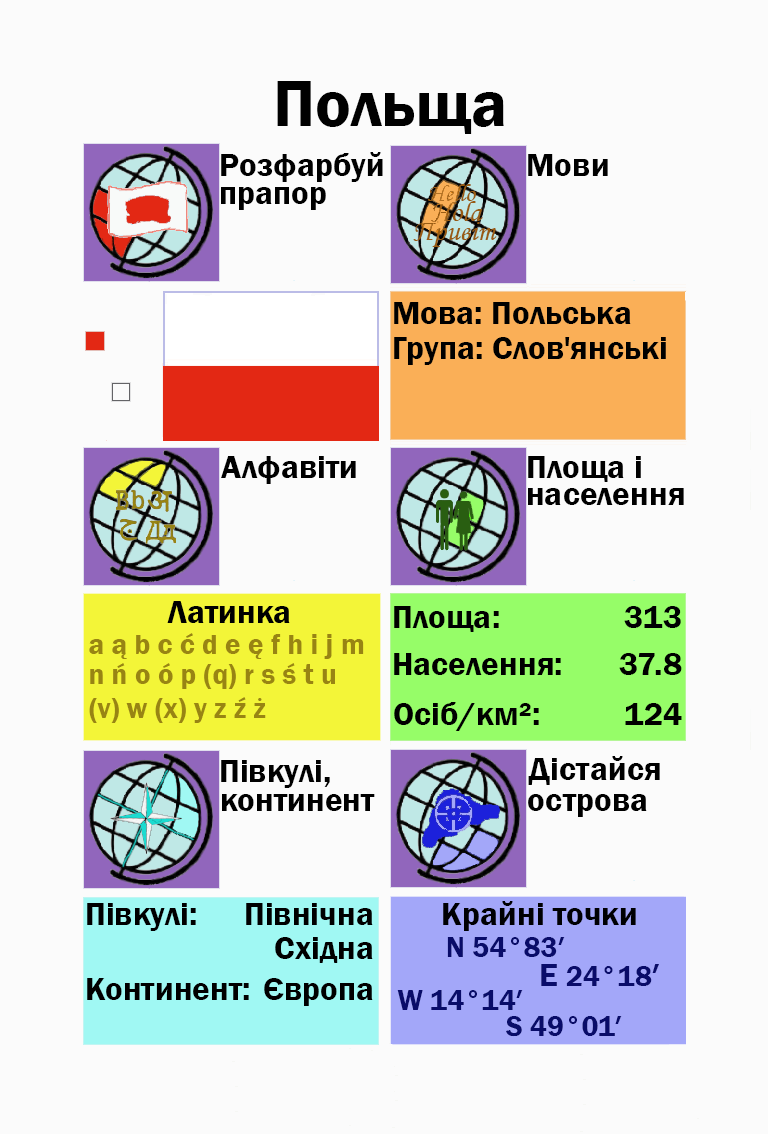
<style>
.page{position:relative;width:768px;height:1134px;background:#fbfbfb}
.page>*{position:absolute;margin:0}
.t1{font:66.7px "FranklinGothic-Demi";color:#000000}
.t2{font:33.3px "FranklinGothic-Demi";color:#000000}
.t3{font:33.3px "FranklinGothic-Demi";color:#000003}
.t4{font:29.2px "FranklinGothic-Demi";color:#988413}
.t5{font:29.2px "FranklinGothic-Demi";color:#090c69}
.t6{font:33.3px "FranklinGothic-Demi";color:#090c69}
</style>
<div class="page">
<p class="t1" style="left:277px;top:81px;width:227px;height:53px">Польща</p>
<p class="t2" style="left:221px;top:152px;width:162px;height:30px">Розфарбуй</p>
<p class="t2" style="left:528px;top:154px;width:80px;height:22px">Мови</p>
<p class="t2" style="left:221px;top:187px;width:105px;height:23px">прапор</p>
<p class="t2" style="left:394px;top:302px;width:237px;height:22px">Мова: Польська</p>
<p class="t2" style="left:394px;top:337px;width:272px;height:28px">Група: Слов'янські</p>
<p class="t2" style="left:221px;top:456px;width:135px;height:28px">Алфавіти</p>
<p class="t2" style="left:528px;top:456px;width:113px;height:26px">Площа і</p>
<p class="t2" style="left:528px;top:488px;width:156px;height:17px">населення</p>
<p class="t2" style="left:167px;top:601px;width:123px;height:22px">Латинка</p>
<p class="t2" style="left:394px;top:606px;width:105px;height:26px">Площа:</p>
<p class="t3" style="left:624px;top:606px;width:57px;height:22px">313</p>
<p class="t4" style="left:89px;top:633px;width:275px;height:26px">a ą b c ć d e ę f h i j m</p>
<p class="t2" style="left:394px;top:653px;width:167px;height:22px">Населення:</p>
<p class="t2" style="left:619px;top:653px;width:63px;height:22px">37.8</p>
<p class="t4" style="left:90px;top:663px;width:245px;height:26px">n ń o ó p (q) r s ś t u</p>
<p class="t4" style="left:89px;top:697px;width:177px;height:26px">(v) w (x) y z ź ż</p>
<p class="t2" style="left:394px;top:702px;width:145px;height:29px">Осіб/км²:</p>
<p class="t2" style="left:625px;top:703px;width:57px;height:22px">124</p>
<p class="t2" style="left:221px;top:760px;width:109px;height:28px">Півкулі,</p>
<p class="t2" style="left:528px;top:756px;width:132px;height:29px">Дістайся</p>
<p class="t2" style="left:222px;top:794px;width:153px;height:17px">континент</p>
<p class="t2" style="left:528px;top:794px;width:119px;height:23px">острова</p>
<p class="t2" style="left:87px;top:903px;width:109px;height:28px">Півкулі:</p>
<p class="t2" style="left:246px;top:903px;width:127px;height:22px">Північна</p>
<p class="t3" style="left:443px;top:901px;width:193px;height:30px">Крайні точки</p>
<p class="t2" style="left:275px;top:937px;width:98px;height:26px">Східна</p>
<p class="t5" style="left:447px;top:937px;width:118px;height:20px">N 54°83′</p>
<p class="t5" style="left:541px;top:964px;width:118px;height:22px"><span class="t6">E </span>24°18<span class="t6">′</span></p>
<p class="t2" style="left:87px;top:978px;width:162px;height:22px">Континент:</p>
<p class="t2" style="left:264px;top:978px;width:109px;height:28px">Європа</p>
<p class="t5" style="left:397px;top:990px;width:126px;height:20px">W 14°14′</p>
<p class="t5" style="left:506px;top:1016px;width:116px;height:21px">S 49°01′</p>
</div>
